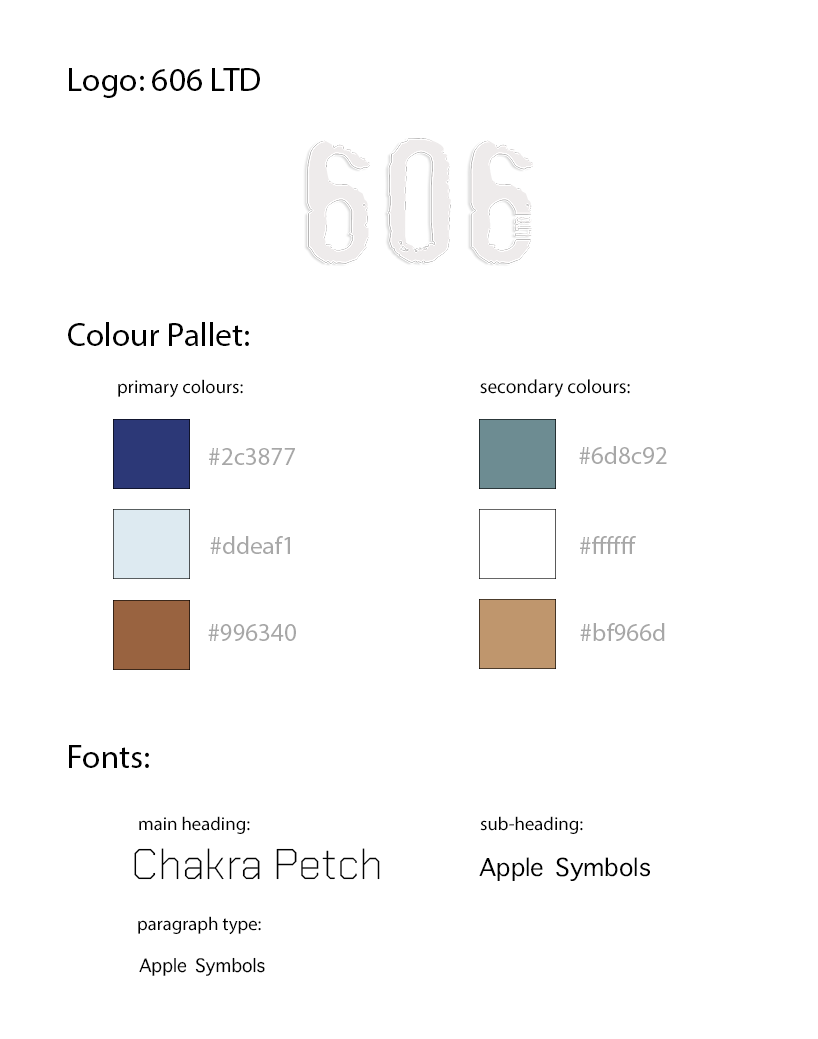
<style>
.page{position:relative;width:818px;height:1039px;background:#ffffff}
.page>*{position:absolute;margin:0}
.t1{font:33.3px "MyriadPro-Regular";color:#000000}
.t2{font:18.7px "MyriadPro-Regular";color:#000000}
.t3{font:19.4px "MyriadPro-Regular";color:#000000}
.t4{font:25px "MyriadPro-Regular";color:#a7a7a7}
.t5{font:42.9px "ChakraPetch-ExtraLight";color:#000000}
.t6{font:33.3px "AppleSymbols";color:#000000}
.t7{font:25px "AppleSymbols";color:#000000}
</style>
<div class="page">
<p class="t1" style="left:69px;top:68px;width:191px;height:30px">Logo: 606 LTD</p>
<p class="t1" style="left:68px;top:322px;width:181px;height:24px">Colour Pallet:</p>
<p class="t2" style="left:118px;top:379px;width:125px;height:19px">primary colours:</p>
<p class="t3" style="left:480px;top:379px;width:150px;height:19px">secondary colours:</p>
<p class="t4" style="left:209px;top:448px;width:86px;height:17px">#2c3877</p>
<p class="t4" style="left:579px;top:446px;width:88px;height:18px">#6d8c92</p>
<p class="t4" style="left:210px;top:536px;width:80px;height:18px">#ddeaf1</p>
<p class="t4" style="left:580px;top:536px;width:56px;height:18px">#ffffff</p>
<p class="t4" style="left:208px;top:624px;width:88px;height:17px">#996340</p>
<p class="t4" style="left:580px;top:623px;width:85px;height:18px">#bf966d</p>
<p class="t1" style="left:69px;top:745px;width:80px;height:23px">Fonts:</p>
<p class="t2" style="left:139px;top:816px;width:111px;height:18px">main heading:</p>
<p class="t2" style="left:480px;top:816px;width:103px;height:18px">sub-heading:</p>
<p class="t5" style="left:134px;top:848px;width:246px;height:32px">Chakra Petch</p>
<p class="t6" style="left:479px;top:857px;width:171px;height:24px">Apple Symbols</p>
<p class="t2" style="left:138px;top:916px;width:123px;height:19px">paragraph type:</p>
<p class="t7" style="left:139px;top:957px;width:126px;height:19px">Apple Symbols</p>
</div>
